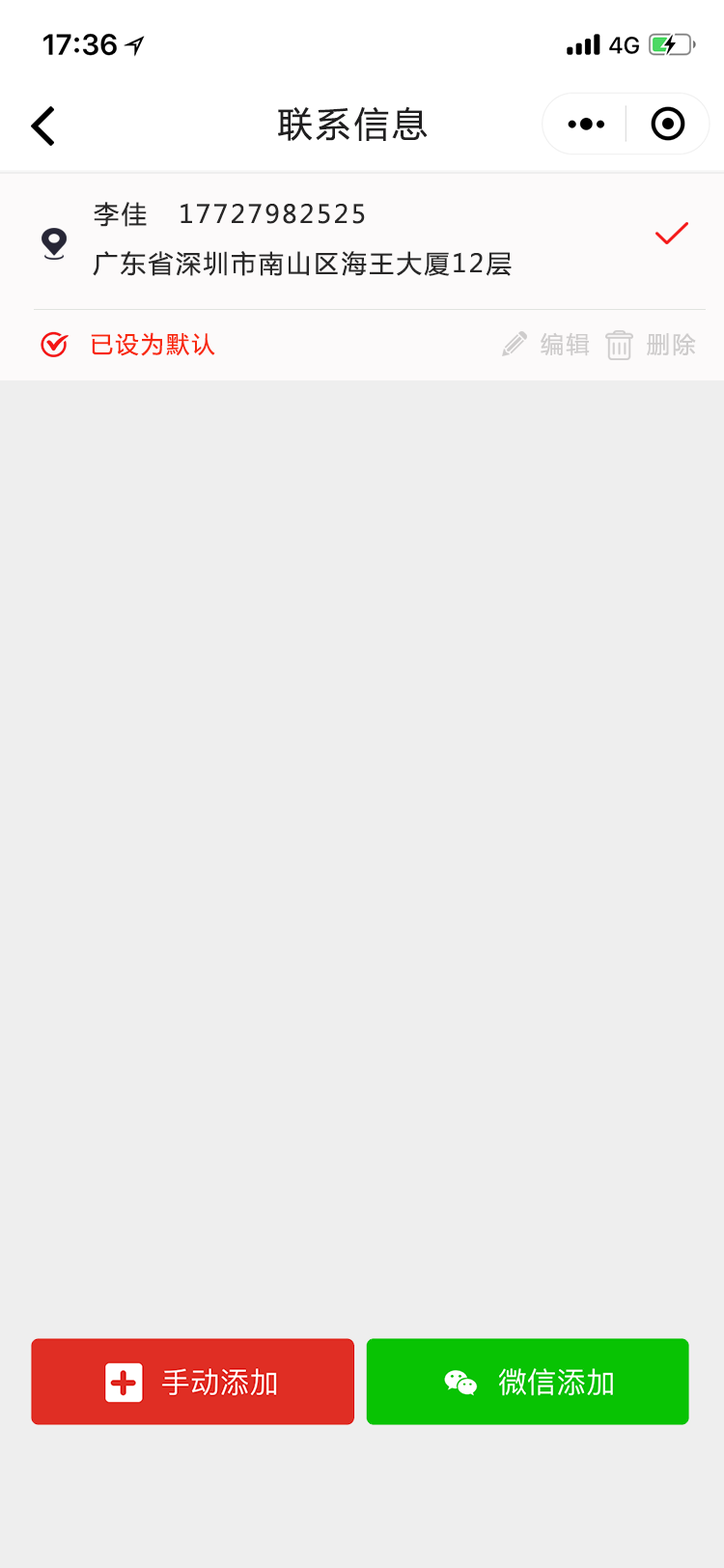
<style>
.page{position:relative;width:724px;height:1568px;background:#eeeeee}
.page>*{position:absolute;margin:0}
.t1{font:34.8px "MicrosoftYaHei";letter-spacing:0.1em;color:#201f20}
.t2{font:25.1px "MicrosoftYaHei";letter-spacing:0.1em;color:#282727}
.t3{font:23.2px "MicrosoftYaHei";letter-spacing:0.1em;color:#f8280d}
.t4{font:23.2px "MicrosoftYaHei";letter-spacing:0.1em;color:#cecccc}
</style>
<div class="page">
<p class="t1" style="left:278px;top:106px;width:150px;height:35px">联系信息</p>
<p class="t2" style="left:94px;top:202px;width:271px;height:25px">李佳   17727982525</p>
<p class="t2" style="left:93px;top:251px;width:419px;height:25px">广东省深圳市南山区海王大厦12层</p>
<p class="t3" style="left:91px;top:332px;width:124px;height:24px">已设为默认</p>
<p class="t4" style="left:541px;top:332px;width:49px;height:24px">编辑</p>
<p class="t4" style="left:647px;top:333px;width:49px;height:23px">删除</p>
</div>
